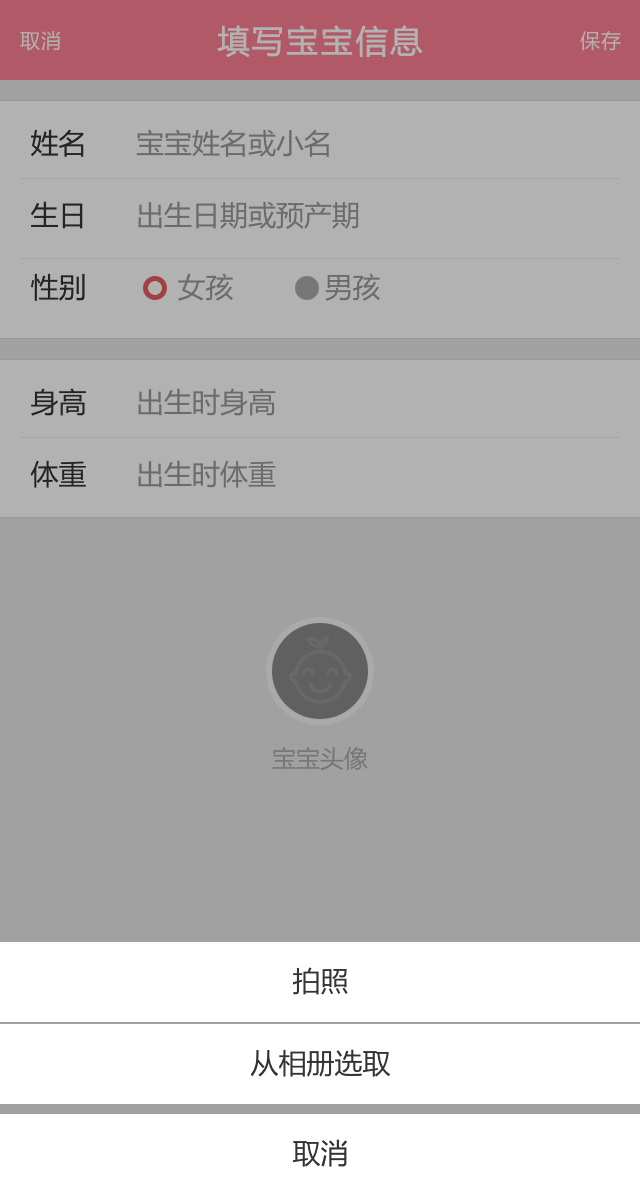
<style>
.page{position:relative;width:640px;height:1194px;background:#a1a1a1}
.page>*{position:absolute;margin:0}
.t1{font:32px "MicrosoftYaHei";letter-spacing:0.05em;color:#b2b2b2;font-weight:bold}
.t2{font:20px "MicrosoftYaHei";letter-spacing:0.05em;color:#b2b2b2}
.t3{font:28px/36px "MicrosoftYaHei";color:#6b6b6b}
.t4{font:24px "MicrosoftYaHei";color:#777777}
.t5{font:28px "MicrosoftYaHei";color:#333333}
</style>
<div class="page">
<p class="t1" style="left:217px;top:25px;width:206px;height:32px">填写宝宝信息</p>
<p class="t2" style="left:20px;top:31px;width:40px;height:20px">取消</p>
<p class="t2" style="left:580px;top:31px;width:41px;height:20px">保存</p>
<p class="t3" style="left:30px;top:129px;width:350px;height:172px">姓名      宝宝姓名或小名<br><br>生日      出生日期或预产期<br><br>性别           女孩           男孩</p>
<p class="t3" style="left:30px;top:388px;width:246px;height:100px">身高      出生时身高<br><br>体重      出生时体重</p>
<p class="t4" style="left:272px;top:747px;width:96px;height:24px">宝宝头像</p>
<p class="t5" style="left:292px;top:967px;width:56px;height:28px">拍照</p>
<p class="t5" style="left:250px;top:1049px;width:140px;height:28px">从相册选取</p>
<p class="t5" style="left:292px;top:1139px;width:55px;height:28px">取消</p>
</div>
